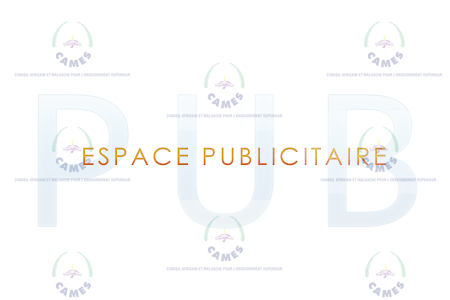
<style>
.page{position:relative;width:450px;height:300px;background:#ffffff}
.page>*{position:absolute;margin:0}
.t1{font:207.8px "Consolas";letter-spacing:0.12em;color:#ffffff;scale:1.04 1}
.t2{font:24px "CenturyGothic";letter-spacing:0.12em;scale:1.04 1}
</style>
<div class="page">
<p class="t1" style="left:37px;top:94px;width:381px;height:135px;opacity:0.14">PUB</p>
<p class="t2" style="left:83px;top:147px;width:303px;height:19px">ESPACE PUBLICITAIRE</p>
</div>
